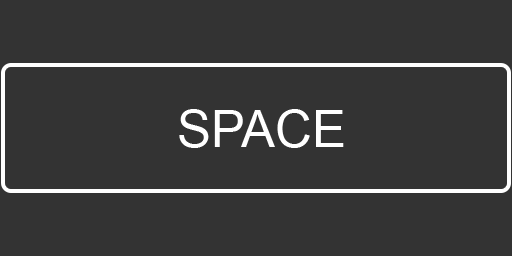
<style>
.page{position:relative;width:512px;height:256px;background:#333333}
.page>*{position:absolute;margin:0}
.t1{font:50.7px "ArialMT";color:#ffffff}
</style>
<div class="page">
<p class="t1" style="left:179px;top:109px;width:165px;height:39px">SPACE</p>
</div>
